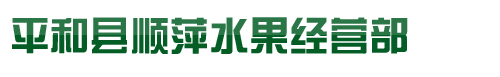
<style>
.page{position:relative;width:500px;height:77px;background:#ffffff}
.page>*{position:absolute;margin:0}
.t1{font:40.2px "FZZYJW--GB1-0"}
</style>
<div class="page">
<p class="t1" style="left:12px;top:17px;width:396px;height:37px">平和县顺萍水果经营部</p>
</div>
